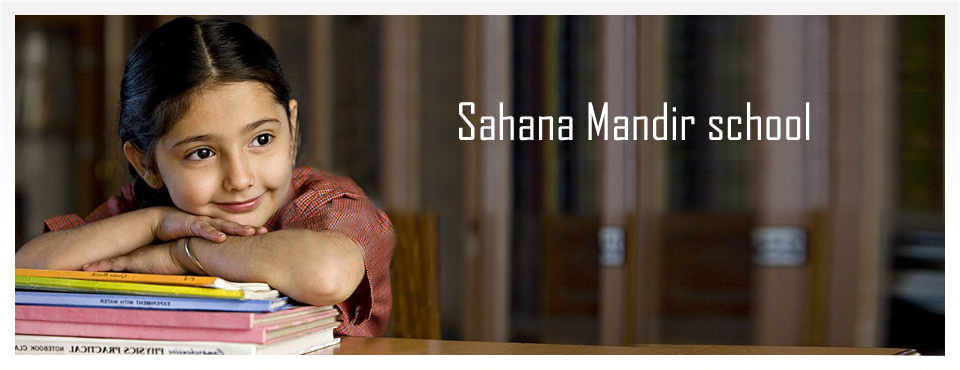
<style>
.page{position:relative;width:960px;height:370px}
.page>*{position:absolute;margin:0}
.t1{font:49.4px "AgencyFB-Reg";color:#ffffff;scale:1.05 1}
</style>
<div class="page">
<p class="t1" style="left:459px;top:102px;width:351px;height:39px">Sahana Mandir school</p>
</div>
